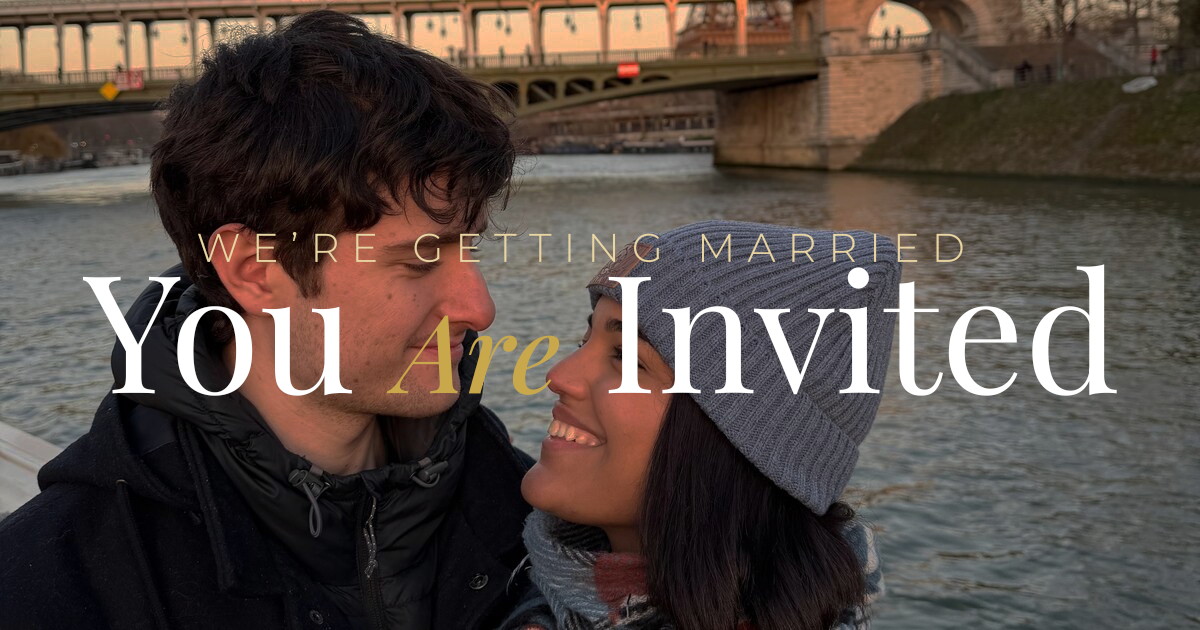
<style>
.page{position:relative;width:1200px;height:630px}
.page>*{position:absolute;margin:0}
.t1{font:40px "Montserrat-Light";letter-spacing:0.3em;color:#e8d5a3}
.t2{font:164.5px "PlayfairDisplay-Regular";color:#ffffff}
.t3{font:109px "PlayfairDisplay-MediumItalic";color:#c9a84c}
</style>
<div class="page">
<p class="t1" style="left:197px;top:232px;width:767px;height:32px">WE’RE GETTING MARRIED</p>
<p class="t2" style="left:82px;top:264px;width:1036px;height:133px">You <span class="t3">Are </span>Invited</p>
</div>
